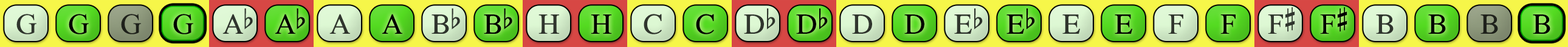
<style>
.page{position:relative;width:1568px;height:47px}
.page>*{position:absolute;margin:0}
.t1{font:29.2px "OpusChords";color:#2f352d}
.t2{font:29.2px "OpusChords";color:#000000}
.t3{font:29.2px "OpusChords";color:#1e211b}
.t4{font:29.2px "OpusChords";letter-spacing:-0.05em;color:#2f352d}
.t5{font:29.2px "OpusChords";letter-spacing:-0.05em;color:#000000}
.t6{font:29.2px "OpusChords";color:#30352d}
.t7{font:29.2px "OpusChords";color:#30362e}
.t8{font:29.2px "OpusChords";color:#1f211b}
</style>
<div class="page">
<p class="t1" style="left:16px;top:14px;width:20px;height:21px">G</p>
<p class="t2" style="left:69px;top:14px;width:20px;height:21px">G</p>
<p class="t3" style="left:121px;top:14px;width:20px;height:21px">G</p>
<p class="t2" style="left:173px;top:14px;width:20px;height:21px">G</p>
<p class="t4" style="left:222px;top:9px;width:31px;height:25px">Ab</p>
<p class="t5" style="left:275px;top:9px;width:30px;height:25px">Ab</p>
<p class="t1" style="left:329px;top:14px;width:21px;height:20px">A</p>
<p class="t2" style="left:382px;top:14px;width:20px;height:20px">A</p>
<p class="t6" style="left:432px;top:9px;width:28px;height:25px">Bb</p>
<p class="t2" style="left:484px;top:9px;width:28px;height:25px">Bb</p>
<p class="t6" style="left:538px;top:15px;width:21px;height:19px">H</p>
<p class="t2" style="left:591px;top:15px;width:20px;height:19px">H</p>
<p class="t7" style="left:644px;top:14px;width:18px;height:21px">C</p>
<p class="t2" style="left:696px;top:14px;width:18px;height:21px">C</p>
<p class="t1" style="left:744px;top:9px;width:31px;height:25px">Db</p>
<p class="t2" style="left:796px;top:9px;width:32px;height:25px">Db</p>
<p class="t1" style="left:852px;top:15px;width:20px;height:19px">D</p>
<p class="t2" style="left:904px;top:15px;width:20px;height:19px">D</p>
<p class="t6" style="left:954px;top:9px;width:29px;height:25px">Eb</p>
<p class="t2" style="left:1006px;top:9px;width:29px;height:25px">Eb</p>
<p class="t7" style="left:1062px;top:15px;width:18px;height:19px">E</p>
<p class="t2" style="left:1115px;top:15px;width:17px;height:19px">E</p>
<p class="t7" style="left:1168px;top:15px;width:15px;height:19px">F</p>
<p class="t2" style="left:1220px;top:15px;width:16px;height:19px">F</p>
<p class="t6" style="left:1268px;top:7px;width:27px;height:27px">F#</p>
<p class="t2" style="left:1320px;top:7px;width:27px;height:27px">F#</p>
<p class="t6" style="left:1376px;top:15px;width:18px;height:19px">B</p>
<p class="t2" style="left:1428px;top:15px;width:18px;height:19px">B</p>
<p class="t8" style="left:1480px;top:15px;width:18px;height:19px">B</p>
<p class="t2" style="left:1533px;top:15px;width:17px;height:19px">B</p>
</div>
